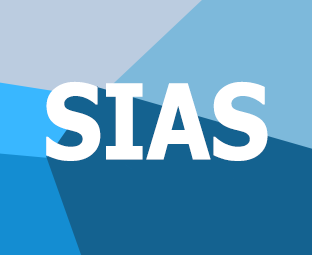
<style>
.page{position:relative;width:312px;height:255px;background:#146290}
.page>*{position:absolute;margin:0}
.t1{font:104.7px "Tahoma-Bold";color:#ffffff;scale:0.89 1}
</style>
<div class="page">
<p class="t1" style="left:46px;top:81px;width:222px;height:80px">SIAS</p>
</div>
